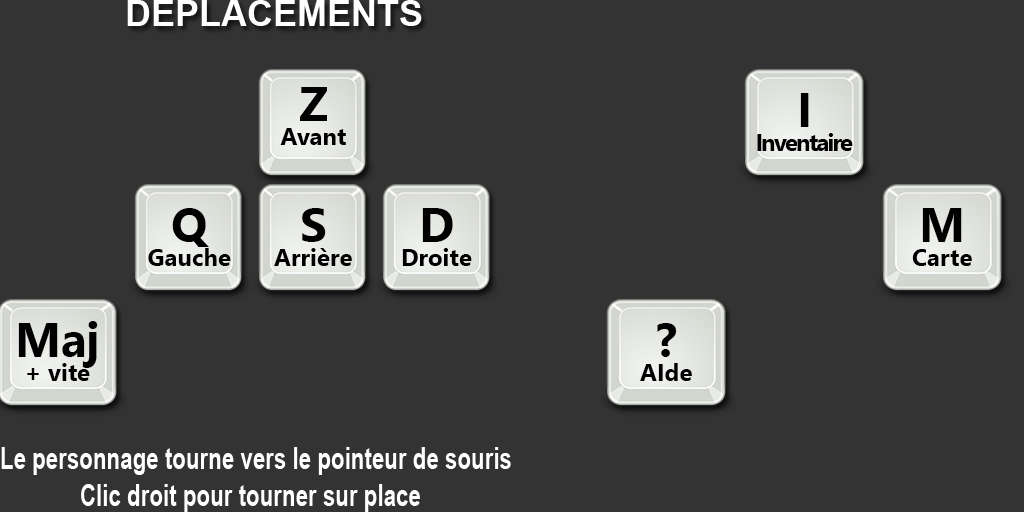
<style>
.page{position:relative;width:1024px;height:512px;background:#333333}
.page>*{position:absolute;margin:0}
.t1{font:36px "Arial-BoldMT";color:#ffffff}
.t2{font:24px/24px "SegoeUI-Bold";color:#000000}
.t3{font:48px/24px "SegoeUI-Bold";color:#000000}
.t4{font:24px/24px "SegoeUI-Bold";letter-spacing:-0.075em;color:#000000}
.t5{font:30px "Arial-BoldMT";color:#ffffff;scale:0.74 1}
</style>
<div class="page">
<p class="t1" style="left:127px;top:0px;width:295px;height:26px">DEPLACEMENTS</p>
<p class="t2" style="left:280px;top:87px;width:66px;height:58px;text-align:center"><span class="t3">Z<br></span>Avant</p>
<p class="t4" style="left:757px;top:93px;width:96px;height:58px;text-align:center"><span class="t3">I<br></span>Inventaire</p>
<p class="t2" style="left:148px;top:208px;width:83px;height:58px;text-align:center"><span class="t3">Q<br></span>Gauche</p>
<p class="t2" style="left:274px;top:208px;width:78px;height:58px;text-align:center"><span class="t3">S<br></span>Arrière</p>
<p class="t2" style="left:402px;top:208px;width:70px;height:58px;text-align:center"><span class="t3">D<br></span>Droite</p>
<p class="t2" style="left:912px;top:208px;width:60px;height:58px;text-align:center"><span class="t3">M<br></span>Carte</p>
<p class="t2" style="left:18px;top:321px;width:80px;height:60px;text-align:center"><span class="t3">Maj<br></span>+ vite</p>
<p class="t2" style="left:640px;top:323px;width:52px;height:58px;text-align:center"><span class="t3">?<br></span>AIde</p>
<p class="t5" style="left:1px;top:447px;width:510px;height:28px">Le personnage tourne vers le pointeur de souris</p>
<p class="t5" style="left:81px;top:484px;width:339px;height:28px">Clic droit pour tourner sur place</p>
</div>
